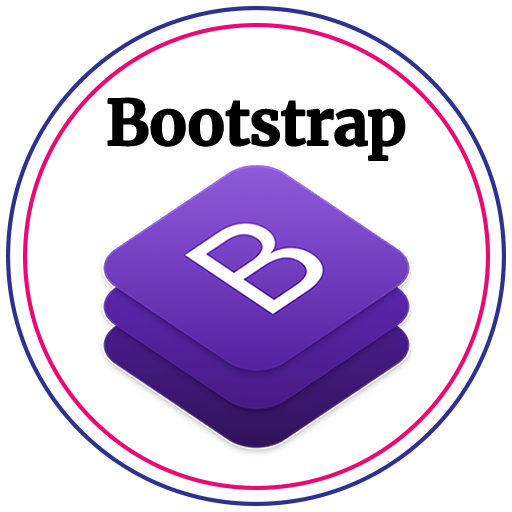
<style>
.page{position:relative;width:512px;height:512px;background:#ffffff}
.page>*{position:absolute;margin:0}
.t1{font:62px "Merriweather-Bold";letter-spacing:-0.04em;color:#000000;font-weight:bold}
</style>
<div class="page">
<p class="t1" style="left:107px;top:97px;width:299px;height:64px">Bootstrap</p>
</div>
